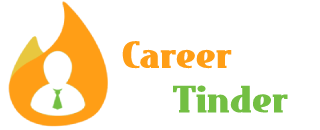
<style>
.page{position:relative;width:320px;height:130px;background:#ffffff}
.page>*{position:absolute;margin:0}
.t1{font:37px "EastMarket";color:#ff9e16}
.t2{font:37px "EastMarket";color:#73bf43}
</style>
<div class="page">
<p class="t1" style="left:122px;top:41px;width:166px;height:72px">Career <br>    <span class="t2">Tinder</span></p>
</div>
